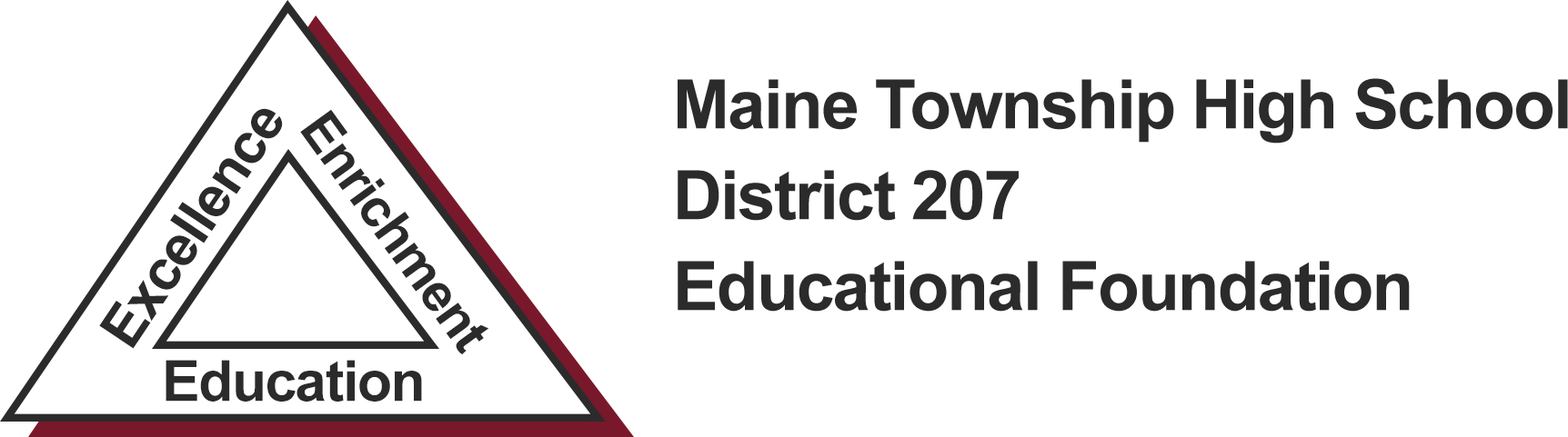
<style>
.page{position:relative;width:1568px;height:437px;background:#ffffff}
.page>*{position:absolute;margin:0}
.t1{font:68.2px/91px "Arial-BoldMT";letter-spacing:-0.025em;color:#2b2b2b}
.t2{font:56.8px "Arial-BoldMT";letter-spacing:-0.025em;color:#2b2b2b}
.t3{font:53.1px "Arial-BoldMT";letter-spacing:-0.025em;color:#2b2b2b}
</style>
<div class="page">
<p class="t1" style="left:678px;top:78px;width:890px;height:234px">Maine Township High School<br>District 207<br>Educational Foundation</p>
<p class="t2" style="left:99px;top:108px;width:184px;height:241px;rotate:-56deg">Excellence</p>
<p class="t3" style="left:300px;top:109px;width:189px;height:246px;rotate:54deg">Enrichment</p>
<p class="t2" style="left:166px;top:360px;width:256px;height:42px">Education</p>
</div>
